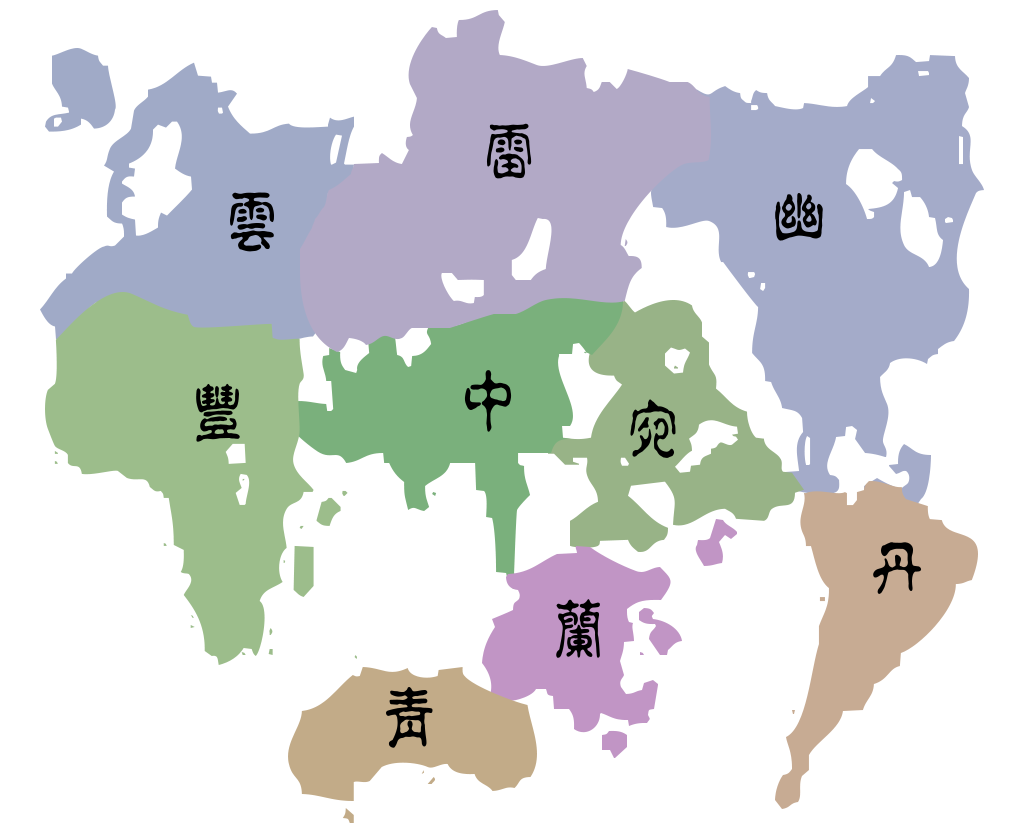
<style>
.page{position:relative;width:1024px;height:833px;background:#ffffff}
.page>*{position:absolute;margin:0}
.t1{font:69.3px "DATX2";color:#000000;font-weight:bold;scale:0.8 1}
</style>
<div class="page">
<p class="t1" style="left:486px;top:124px;width:47px;height:56px">雷</p>
<p class="t1" style="left:229px;top:192px;width:47px;height:61px">雲</p>
<p class="t1" style="left:775px;top:193px;width:49px;height:49px">幽</p>
<p class="t1" style="left:464px;top:370px;width:49px;height:64px">中</p>
<p class="t1" style="left:196px;top:384px;width:45px;height:60px">豐</p>
<p class="t1" style="left:630px;top:399px;width:47px;height:60px">宛</p>
<p class="t1" style="left:873px;top:542px;width:50px;height:53px">丹</p>
<p class="t1" style="left:556px;top:599px;width:46px;height:60px">蘭</p>
<p class="t1" style="left:385px;top:686px;width:49px;height:63px">青</p>
</div>
